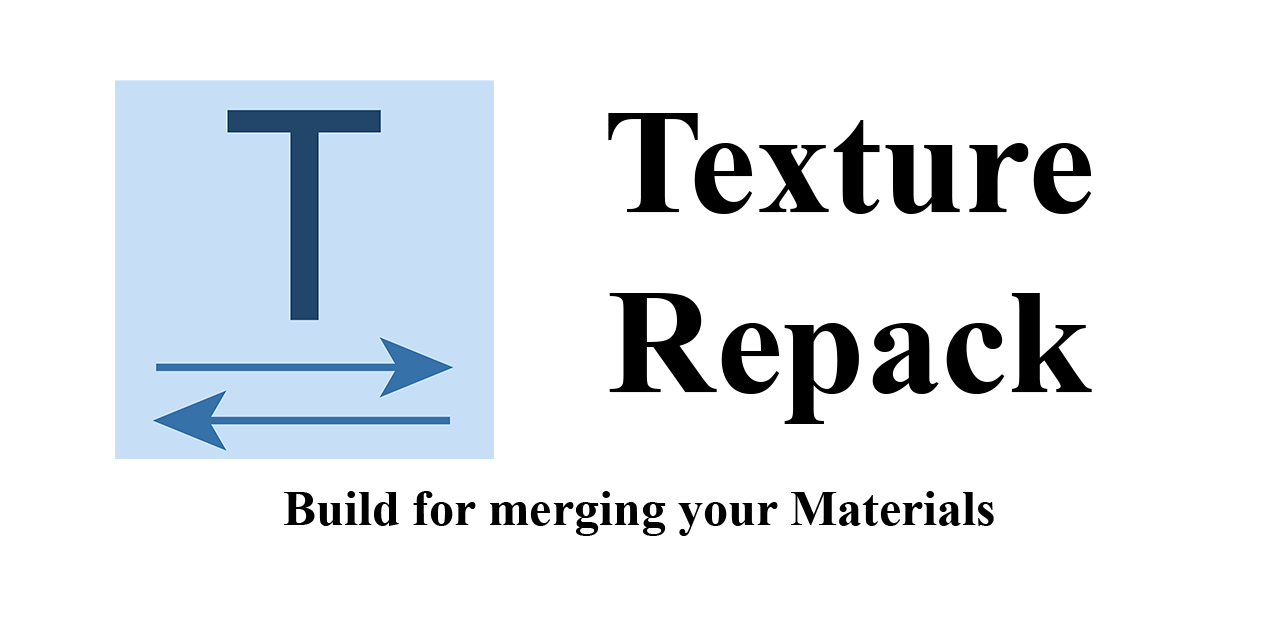
<style>
.page{position:relative;width:1280px;height:640px;background:#ffffff}
.page>*{position:absolute;margin:0}
.t1{font:150px "TimesNewRomanPS-BoldMT";color:#000000}
.t2{font:50px "TimesNewRomanPS-BoldMT";color:#000000}
</style>
<div class="page">
<p class="t1" style="left:608px;top:113px;width:484px;height:311px;text-align:center">Texture<br>Repack</p>
<p class="t2" style="left:284px;top:491px;width:710px;height:45px">Build for merging your Materials</p>
</div>
